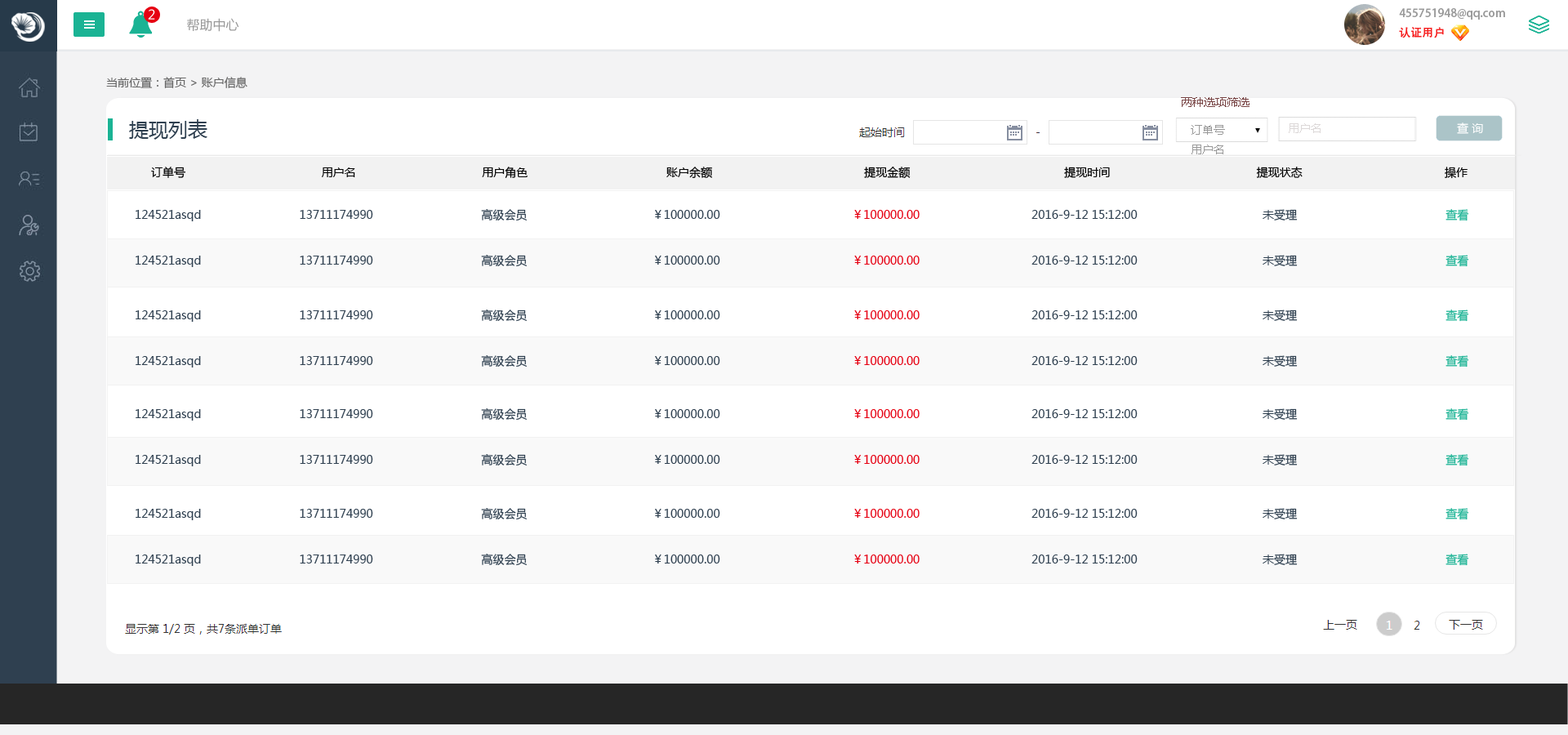
<style>
.page{position:relative;width:1568px;height:735px;background:#ffffff}
.page>*{position:absolute;margin:0}
.t1{font:13.1px "MicrosoftYaHei";color:#ffffff}
.t2{font:13.1px "MicrosoftYaHei";color:#999999}
.t3{font:11.4px/19.6px "AdobeHeitiStd-Regular";color:#999999}
.t4{font:11.4px/19.6px "AdobeHeitiStd-Regular";color:#f61e1e}
.t5{font:11.4px/19.6px "AdobeHeitiStd-Regular";color:#ffffff}
.t6{font:11.4px "MicrosoftYaHei";color:#666666}
.t7{font:11.4px "MicrosoftYaHei";color:#784545}
.t8{font:19.6px "MicrosoftYaHei";color:#2f4050}
.t9{font:11.4px "MicrosoftYaHei";color:#999999}
.t10{font:11.4px "MicrosoftYaHei";color:#dcd8d8}
.t11{font:11.4px "MicrosoftYaHei";color:#ffffff}
.t12{font:11.4px "MicrosoftYaHei";color:#000000}
.t13{font:11.4px "MicrosoftYaHei";color:#2f4050}
.t14{font:11.4px "MicrosoftYaHei";color:#e60012}
.t15{font:11.4px "MicrosoftYaHei";color:#1ab394}
</style>
<div class="page">
<p class="t1" style="left:148px;top:9px;width:7px;height:11px">2</p>
<p class="t2" style="left:187px;top:18px;width:52px;height:14px">帮助中心</p>
<p class="t3" style="left:1399px;top:8px;width:106px;height:30px">455751948@qq.com<br><span class="t4">认证用户               </span><span class="t5">退出</span></p>
<p class="t6" style="left:106px;top:77px;width:141px;height:11px">当前位置：首页 &gt; 账户信息</p>
<p class="t7" style="left:1181px;top:97px;width:69px;height:10px">两种选项筛选</p>
<p class="t8" style="left:129px;top:119px;width:78px;height:21px">提现列表</p>
<p class="t9" style="left:1191px;top:125px;width:34px;height:29px">订单号<br>用户名</p>
<p class="t10" style="left:1289px;top:123px;width:32px;height:10px">用户名</p>
<p class="t11" style="left:1457px;top:122px;width:26px;height:12px">查 询</p>
<p class="t12" style="left:151px;top:167px;width:1317px;height:12px">订单号                                  用户名                                      用户角色                                         账户余额                                      提现金额                                             提现时间                                         提现状态                                        操作</p>
<p class="t13" style="left:136px;top:209px;width:1333px;height:12px">124521asqd                             13711174990                                高级会员                                     ￥100000.00                                       <span class="t14">￥100000.00                                 </span>2016-9-12 15:12:00                                     未受理                                            <span class="t15">查看</span></p>
<p class="t13" style="left:136px;top:255px;width:1333px;height:12px">124521asqd                             13711174990                                高级会员                                     ￥100000.00                                       <span class="t14">￥100000.00                                 </span>2016-9-12 15:12:00                                     未受理                                            <span class="t15">查看</span></p>
<p class="t13" style="left:136px;top:310px;width:1333px;height:12px">124521asqd                             13711174990                                高级会员                                     ￥100000.00                                       <span class="t14">￥100000.00                                 </span>2016-9-12 15:12:00                                     未受理                                            <span class="t15">查看</span></p>
<p class="t13" style="left:136px;top:355px;width:1333px;height:13px">124521asqd                             13711174990                                高级会员                                     ￥100000.00                                       <span class="t14">￥100000.00                                 </span>2016-9-12 15:12:00                                     未受理                                            <span class="t15">查看</span></p>
<p class="t13" style="left:136px;top:408px;width:1333px;height:13px">124521asqd                             13711174990                                高级会员                                     ￥100000.00                                       <span class="t14">￥100000.00                                 </span>2016-9-12 15:12:00                                     未受理                                            <span class="t15">查看</span></p>
<p class="t13" style="left:136px;top:454px;width:1333px;height:12px">124521asqd                             13711174990                                高级会员                                     ￥100000.00                                       <span class="t14">￥100000.00                                 </span>2016-9-12 15:12:00                                     未受理                                            <span class="t15">查看</span></p>
<p class="t13" style="left:136px;top:508px;width:1333px;height:12px">124521asqd                             13711174990                                高级会员                                     ￥100000.00                                       <span class="t14">￥100000.00                                 </span>2016-9-12 15:12:00                                     未受理                                            <span class="t15">查看</span></p>
<p class="t13" style="left:136px;top:554px;width:1333px;height:12px">124521asqd                             13711174990                                高级会员                                     ￥100000.00                                       <span class="t14">￥100000.00                                 </span>2016-9-12 15:12:00                                     未受理                                            <span class="t15">查看</span></p>
</div>
